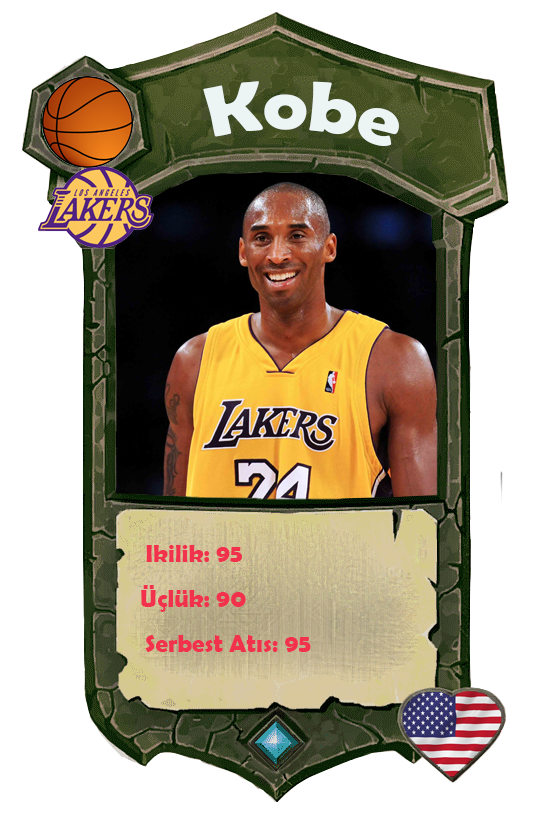
<style>
.page{position:relative;width:558px;height:814px;background:#ffffff}
.page>*{position:absolute;margin:0}
.t1{font:70.9px "BerlinSansFBDemi-Bold";color:#ecf4f4;scale:1.06 1}
.t2{font:25px "BerlinSansFBDemi-Bold";color:#f2314d}
</style>
<div class="page">
<p class="t1" style="left:203px;top:81px;width:196px;height:65px;rotate:4deg">Kobe</p>
<p class="t2" style="left:146px;top:545px;width:96px;height:17px">Ikilik: 95</p>
<p class="t2" style="left:141px;top:585px;width:105px;height:27px">Üçlük: 90</p>
<p class="t2" style="left:145px;top:635px;width:166px;height:17px">Serbest Atıs: 95</p>
</div>
